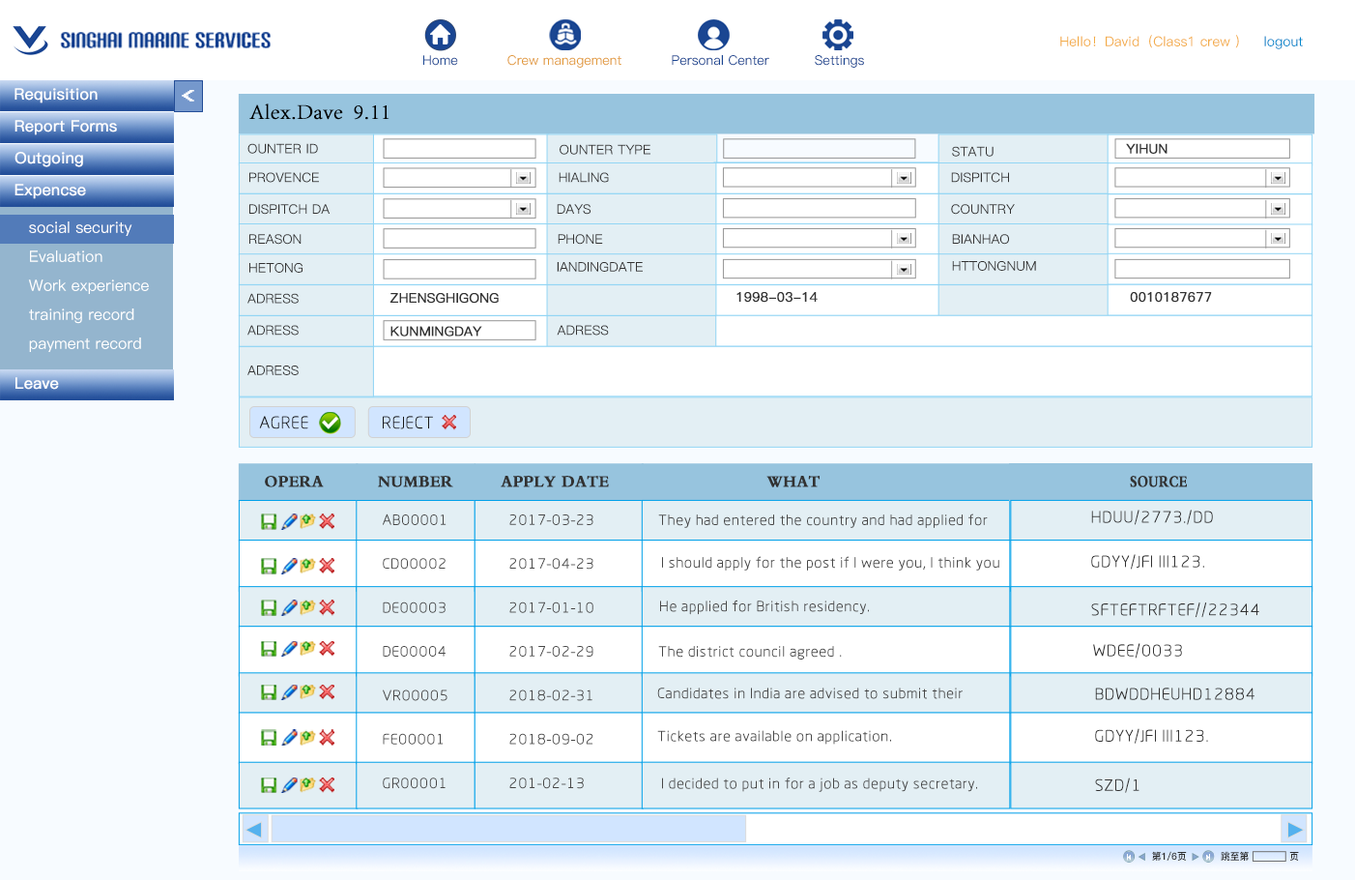
<style>
.page{position:relative;width:1355px;height:880px;background:#ffffff}
.page>*{position:absolute;margin:0}
.t1{font:13.5px "PingFang-SC-Medium";color:#f3ac47}
.t2{font:13.5px "PingFang-SC-Medium";color:#0088cc}
.t3{font:13.2px "PingFang-SC-Medium";color:#1a4692}
.t4{font:13.2px "PingFang-SC-Medium";color:#e29b3a}
.t5{font:15.5px "PingFang-SC-Medium";color:#ffffff;font-weight:bold}
.t6{font:19.9px "Terminal";color:#ffffff;font-weight:bold;scale:1.22 1}
.t7{font:21.8px "AdobeSongStd-Light";color:#000000;font-weight:bold}
.t8{font:13.1px "PingFang-SC-Medium";color:#333333}
.t9{font:13.1px "PingFang-SC-Medium";color:#333333;font-weight:bold}
.t10{font:15.5px/29px "PingFang-SC-Medium";color:#ffffff}
.t11{font:17.7px "RTWSYueRoudGoDemo-Regular";color:#181818}
.t12{font:17px "Ò¶¸ùÓÑÃ«±ÊÐÐÊé¼òÌå";color:#323232;font-weight:bold;scale:0.93 1}
.t13{font:17px "Ò¶¸ùÓÑÃ«±ÊÐÐÊé¼òÌå";color:#323232;font-weight:bold;scale:0.92 1}
.t14{font:17px "Ò¶¸ùÓÑÃ«±ÊÐÐÊé¼òÌå";color:#323232;font-weight:bold;scale:0.76 1}
.t15{font:17px "RTWSYueRoudGoDemo-Regular";color:#323232;scale:1.03 1}
.t16{font:15.1px/43.9px "RTWSYueRoudGoDemo-Regular";color:#474747;scale:1.03 1}
.t17{font:15.1px "RTWSYueRoudGoDemo-Regular";color:#474747;scale:1.03 1}
.t18{font:9.7px "PingFang-SC-Heavy";color:#2d2e2e}
</style>
<div class="page">
<p class="t1" style="left:1061px;top:35px;width:178px;height:13px">Hello！David（Class1 crew ）</p>
<p class="t2" style="left:1265px;top:36px;width:38px;height:13px">logout</p>
<p class="t3" style="left:423px;top:55px;width:35px;height:11px">Home</p>
<p class="t4" style="left:508px;top:55px;width:114px;height:13px">Crew management</p>
<p class="t3" style="left:672px;top:55px;width:98px;height:11px">Personal Center</p>
<p class="t3" style="left:815px;top:55px;width:49px;height:13px">Settings</p>
<p class="t5" style="left:15px;top:88px;width:83px;height:15px">Requisition</p>
<p class="t6" style="left:182px;top:90px;width:12px;height:12px;rotate:180deg">&gt;</p>
<p class="t7" style="left:249px;top:103px;width:141px;height:17px">Alex.Dave  9.11</p>
<p class="t5" style="left:15px;top:120px;width:102px;height:15px">Report Forms</p>
<p class="t8" style="left:247px;top:143px;width:71px;height:11px">OUNTER ID</p>
<p class="t8" style="left:560px;top:144px;width:91px;height:11px">OUNTER TYPE</p>
<p class="t8" style="left:952px;top:146px;width:42px;height:11px">STATU</p>
<p class="t9" style="left:1126px;top:143px;width:42px;height:11px">YIHUN</p>
<p class="t5" style="left:15px;top:152px;width:68px;height:15px">Outgoing</p>
<p class="t8" style="left:249px;top:172px;width:70px;height:11px">PROVENCE</p>
<p class="t8" style="left:559px;top:172px;width:50px;height:11px">HIALING</p>
<p class="t8" style="left:951px;top:172px;width:58px;height:11px">DISPITCH</p>
<p class="t5" style="left:15px;top:184px;width:71px;height:15px">Expencse</p>
<p class="t8" style="left:249px;top:204px;width:81px;height:11px">DISPITCH DA</p>
<p class="t8" style="left:557px;top:204px;width:34px;height:11px">DAYS</p>
<p class="t8" style="left:951px;top:204px;width:64px;height:11px">COUNTRY</p>
<p class="t10" style="left:28px;top:221px;width:121px;height:131px">social security<br>Evaluation<br>Work experience<br>training record<br>payment record</p>
<p class="t8" style="left:249px;top:234px;width:53px;height:11px">REASON</p>
<p class="t8" style="left:558px;top:234px;width:45px;height:11px">PHONE</p>
<p class="t8" style="left:952px;top:234px;width:57px;height:11px">BIANHAO</p>
<p class="t8" style="left:249px;top:263px;width:54px;height:10px">HETONG</p>
<p class="t8" style="left:557px;top:262px;width:86px;height:10px">IANDINGDATE</p>
<p class="t8" style="left:952px;top:261px;width:84px;height:10px">HTTONGNUM</p>
<p class="t8" style="left:247px;top:293px;width:52px;height:11px">ADRESS</p>
<p class="t9" style="left:390px;top:293px;width:109px;height:11px">ZHENSGHIGONG</p>
<p class="t9" style="left:737px;top:292px;width:81px;height:11px">1998-03-14</p>
<p class="t9" style="left:1130px;top:292px;width:82px;height:11px">0010187677</p>
<p class="t8" style="left:247px;top:325px;width:52px;height:10px">ADRESS</p>
<p class="t9" style="left:391px;top:326px;width:91px;height:10px">KUNMINGDAY</p>
<p class="t8" style="left:557px;top:325px;width:52px;height:10px">ADRESS</p>
<p class="t8" style="left:247px;top:365px;width:52px;height:10px">ADRESS</p>
<p class="t5" style="left:15px;top:377px;width:44px;height:13px">Leave</p>
<p class="t11" style="left:259px;top:416px;width:49px;height:13px">AGREE</p>
<p class="t11" style="left:383px;top:416px;width:50px;height:13px">REJECT</p>
<p class="t12" style="left:265px;top:476px;width:59px;height:11px">OPERA</p>
<p class="t12" style="left:378px;top:476px;width:75px;height:11px">NUMBER</p>
<p class="t13" style="left:501px;top:476px;width:108px;height:11px">APPLY DATE</p>
<p class="t13" style="left:767px;top:476px;width:53px;height:11px">WHAT</p>
<p class="t14" style="left:1130px;top:476px;width:57px;height:11px">SOURCE</p>
<p class="t15" style="left:1091px;top:509px;width:122px;height:16px">HDUU/2773./DD</p>
<p class="t16" style="left:383px;top:513px;width:65px;height:276px">AB00001<br>CD00002<br>DE00003<br>DE00004<br>VR00005<br>FE00001<br>GR00001</p>
<p class="t16" style="left:509px;top:514px;width:85px;height:275px">2017-03-23<br>2017-04-23<br>2017-01-10<br>2017-02-29<br>2018-02-31<br>2018-09-02<br>201-02-13</p>
<p class="t17" style="left:658px;top:513px;width:330px;height:15px">They had entered the country and had applied for</p>
<p class="t17" style="left:662px;top:556px;width:338px;height:14px">I should apply for the post if I were you, I think you</p>
<p class="t15" style="left:1091px;top:554px;width:114px;height:15px">GDYY/JFI III123.</p>
<p class="t17" style="left:660px;top:599px;width:209px;height:16px">He applied for British residency.</p>
<p class="t15" style="left:1091px;top:602px;width:169px;height:16px">SFTEFTRFTEF//22344</p>
<p class="t17" style="left:658px;top:646px;width:184px;height:13px">The district council agreed .</p>
<p class="t15" style="left:1093px;top:643px;width:89px;height:15px">WDEE/0033</p>
<p class="t17" style="left:657px;top:687px;width:306px;height:12px">Candidates in India are advised to submit their</p>
<p class="t15" style="left:1095px;top:687px;width:160px;height:13px">BDWDDHEUHD12884</p>
<p class="t17" style="left:657px;top:730px;width:234px;height:14px">Tickets are available on application.</p>
<p class="t15" style="left:1095px;top:728px;width:113px;height:15px">GDYY/JFI III123.</p>
<p class="t17" style="left:662px;top:777px;width:315px;height:15px">I decided to put in for a job as deputy secretary.</p>
<p class="t15" style="left:1095px;top:777px;width:45px;height:16px">SZD/1</p>
<p class="t18" style="left:1152px;top:851px;width:35px;height:9px">第1/6页</p>
<p class="t18" style="left:1221px;top:851px;width:78px;height:9px">跳至第             页</p>
</div>
